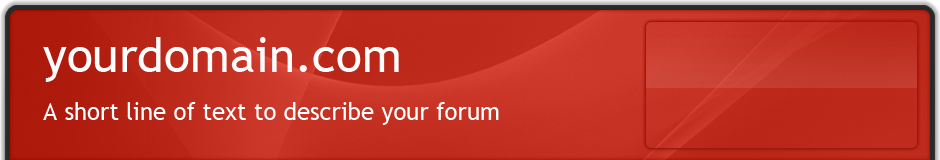
<style>
.page{position:relative;width:940px;height:160px}
.page>*{position:absolute;margin:0}
.t1{font:24px/48px "TrebuchetMS";color:#fffefe}
.t2{font:48px/48px "TrebuchetMS";color:#fffefe}
</style>
<div class="page">
<p class="t1" style="left:43px;top:37px;width:456px;height:88px"><span class="t2">yourdomain.com<br></span>A short line of text to describe your forum</p>
</div>
